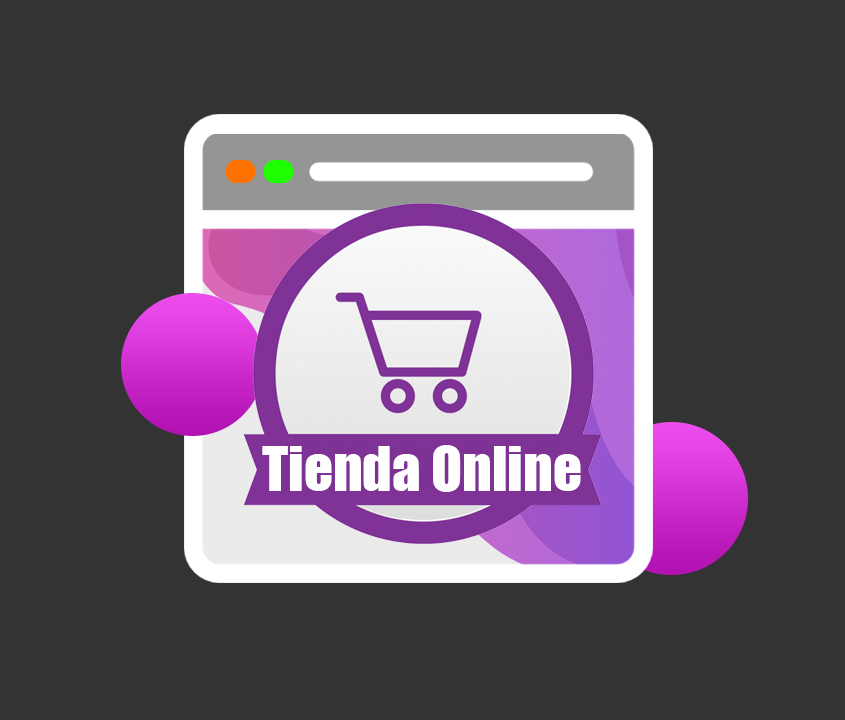
<style>
.page{position:relative;width:845px;height:720px;background:#333333}
.page>*{position:absolute;margin:0}
.t1{font:57px "Impact";color:#ffffff}
</style>
<div class="page">
<p class="t1" style="left:262px;top:445px;width:319px;height:47px">Tienda Online</p>
</div>
